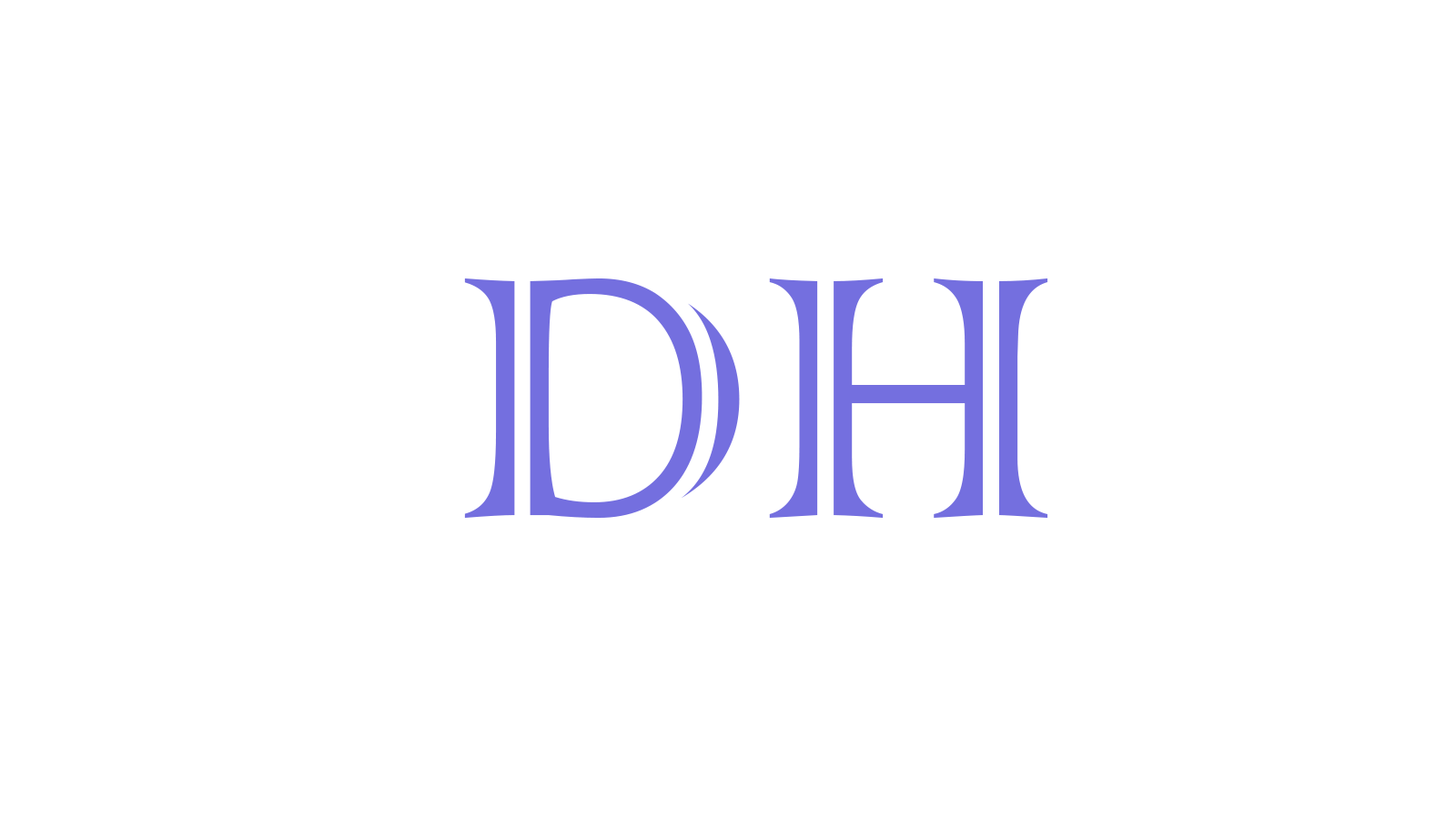
<style>
.page{position:relative;width:1456px;height:819px;background:#ffffff}
.page>*{position:absolute;margin:0}
.t1{font:455px "ColonnaMT";color:#746fdf}
</style>
<div class="page">
<p class="t1" style="left:464px;top:278px;width:584px;height:240px">DH</p>
</div>
